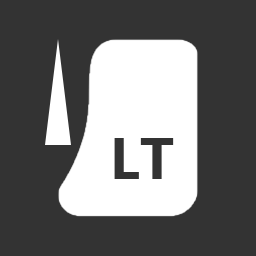
<style>
.page{position:relative;width:256px;height:256px;background:#333333}
.page>*{position:absolute;margin:0}
.t1{font:58.3px "MicrosoftNewTaiLue-Bold";color:#333333}
</style>
<div class="page">
<p class="t1" style="left:114px;top:138px;width:60px;height:41px">LT</p>
</div>
